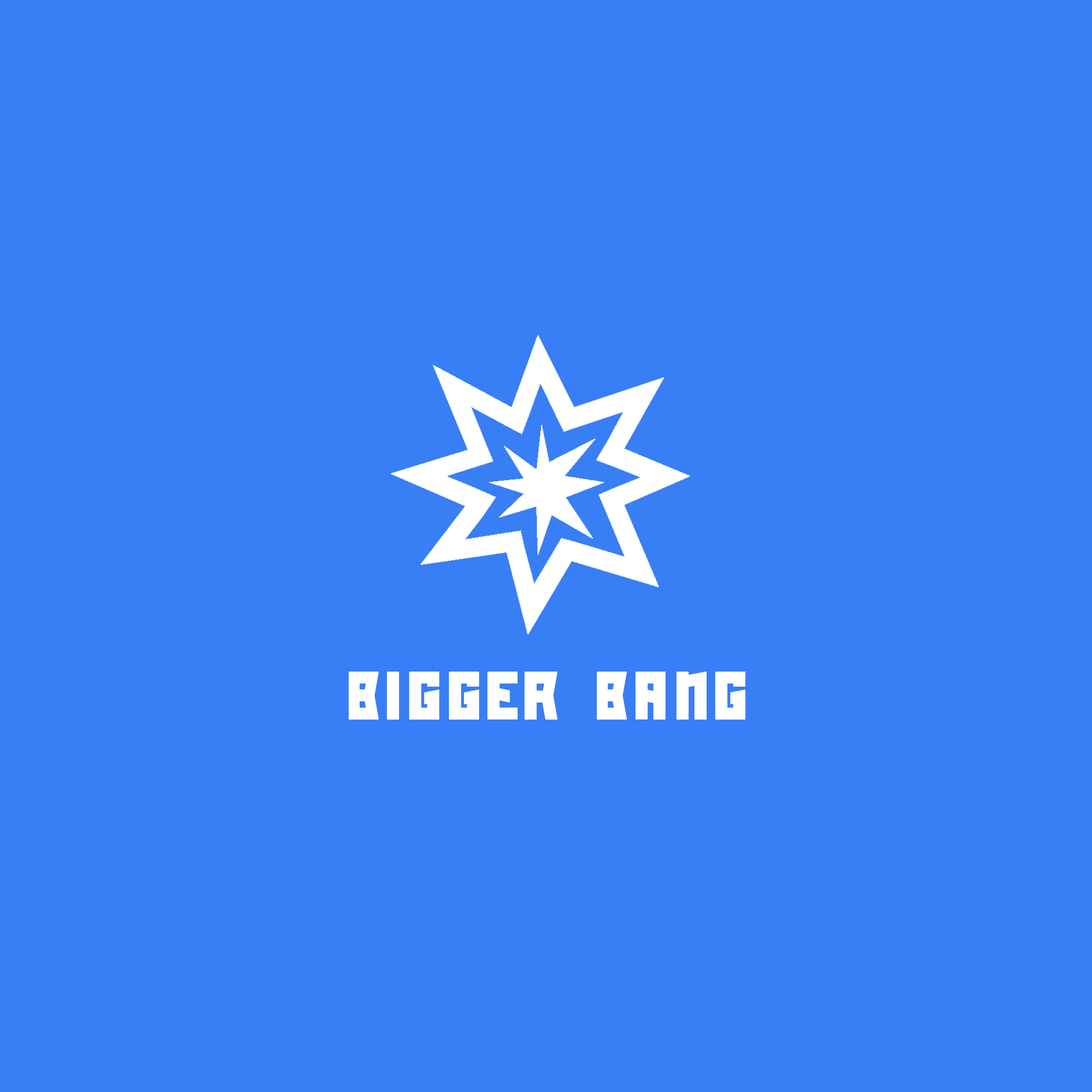
<style>
.page{position:relative;width:1092px;height:1092px;background:#387ef5}
.page>*{position:absolute;margin:0}
.t1{font:64px "Slash";color:#ffffff}
</style>
<div class="page">
<p class="t1" style="left:349px;top:671px;width:396px;height:49px">BIGGER BANG</p>
</div>
